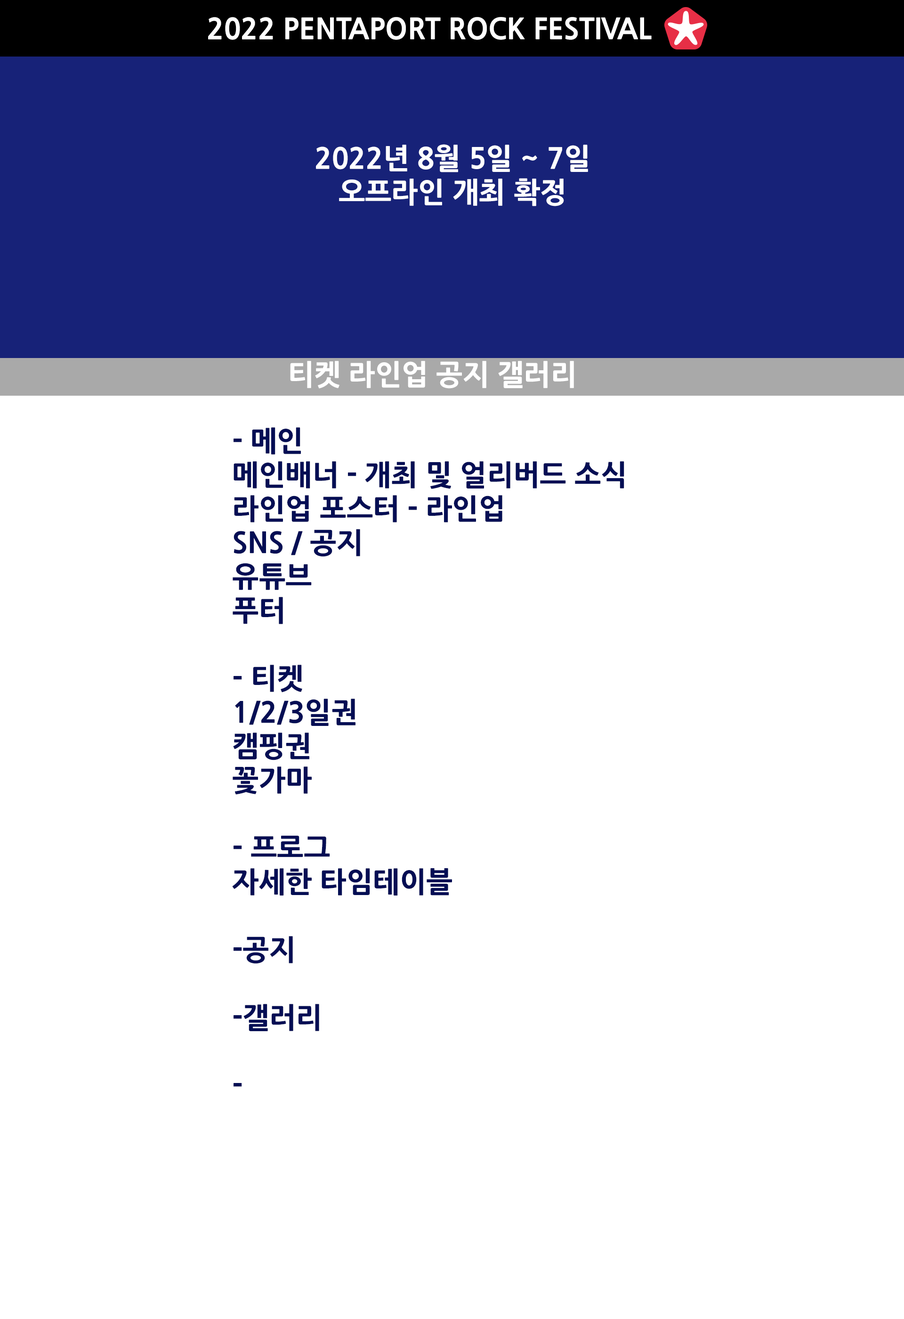
<style>
.page{position:relative;width:904px;height:1319px;background:#ffffff}
.page>*{position:absolute;margin:0}
.t1{font:28.3px "NanumGothicExtraBold";color:#ffffff}
.t2{font:28.3px "NanumGothicExtraBold";color:#040e54}
</style>
<div class="page">
<p class="t1" style="left:208px;top:17px;width:444px;height:23px">2022 PENTAPORT ROCK FESTIVAL</p>
<p class="t1" style="left:316px;top:144px;width:272px;height:62px;text-align:center">2022년 8월 5일 ~ 7일<br>오프라인 개최 확정</p>
<p class="t1" style="left:290px;top:361px;width:284px;height:28px">티켓 라인업 공지 갤러리</p>
<p class="t2" style="left:232px;top:427px;width:392px;height:660px">- 메인<br>메인배너 - 개최 및 얼리버드 소식<br>라인업 포스터 - 라인업<br>SNS / 공지<br>유튜브<br>푸터<br><br>- 티켓<br>1/2/3일권<br>캠핑권<br>꽃가마<br><br>- 프로그<br>자세한 타임테이블<br><br>-공지<br><br>-갤러리<br><br>-</p>
</div>
